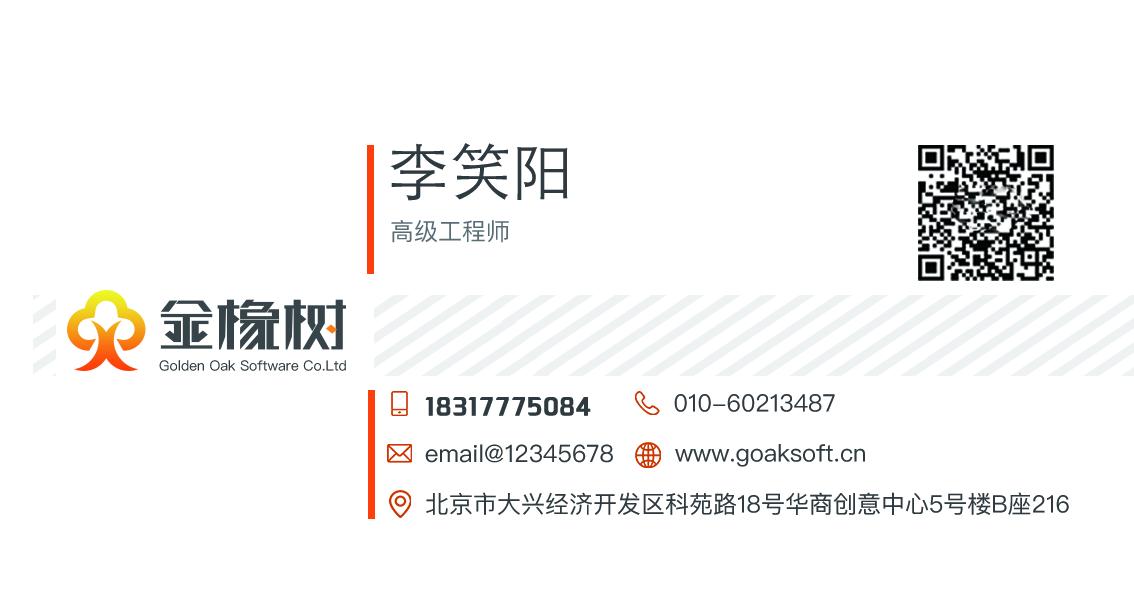
<style>
.page{position:relative;width:1134px;height:602px;background:#ffffff}
.page>*{position:absolute;margin:0}
.t1{font:62px "STHeitiSC-Light";color:#2e3a3f}
.t2{font:24px "PingFangSC-Regular";color:#586d74}
.t3{font:14px "PingFangSC-Regular";color:#2e3a3f}
.t4{font:28px "Tensentype-ZhiHeiJ-W5";color:#2e3a3f}
.t5{font:24px "PingFangSC-Regular";color:#2e3a3f}
</style>
<div class="page">
<p class="t1" style="left:390px;top:143px;width:178px;height:58px">李笑阳</p>
<p class="t2" style="left:391px;top:220px;width:118px;height:23px">高级工程师</p>
<p class="t3" style="left:159px;top:360px;width:187px;height:11px">Golden Oak Software Co.Ltd</p>
<p class="t4" style="left:425px;top:397px;width:166px;height:19px">18317775084</p>
<p class="t5" style="left:674px;top:394px;width:161px;height:18px">010-60213487</p>
<p class="t5" style="left:425px;top:444px;width:188px;height:19px">email@12345678</p>
<p class="t5" style="left:675px;top:444px;width:190px;height:23px">www.goaksoft.cn</p>
<p class="t5" style="left:426px;top:492px;width:643px;height:23px">北京市大兴经济开发区科苑路18号华商创意中心5号楼B座216</p>
</div>
